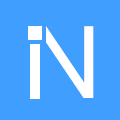
<style>
.page{position:relative;width:120px;height:120px;background:#409eff}
.page>*{position:absolute;margin:0}
.t1{font:100px "ArialMT";color:#ffffff}
</style>
<div class="page">
<p class="t1" style="left:36px;top:26px;width:58px;height:72px">N</p>
</div>
